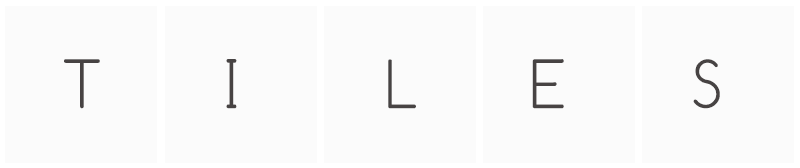
<style>
.page{position:relative;width:800px;height:168px;background:#fbfbfb}
.page>*{position:absolute;margin:0}
.t1{font:72px "Comfortaa-Thin";color:#474343}
</style>
<div class="page">
<p class="t1" style="left:64px;top:59px;width:656px;height:50px">T    I    L    E    S</p>
</div>
